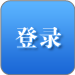
<style>
.page{position:relative;width:75px;height:75px}
.page>*{position:absolute;margin:0}
.t1{font:24px "FZDBSJW--GB1-0";color:#ffffff}
</style>
<div class="page">
<p class="t1" style="left:15px;top:26px;width:46px;height:22px">登录</p>
</div>
